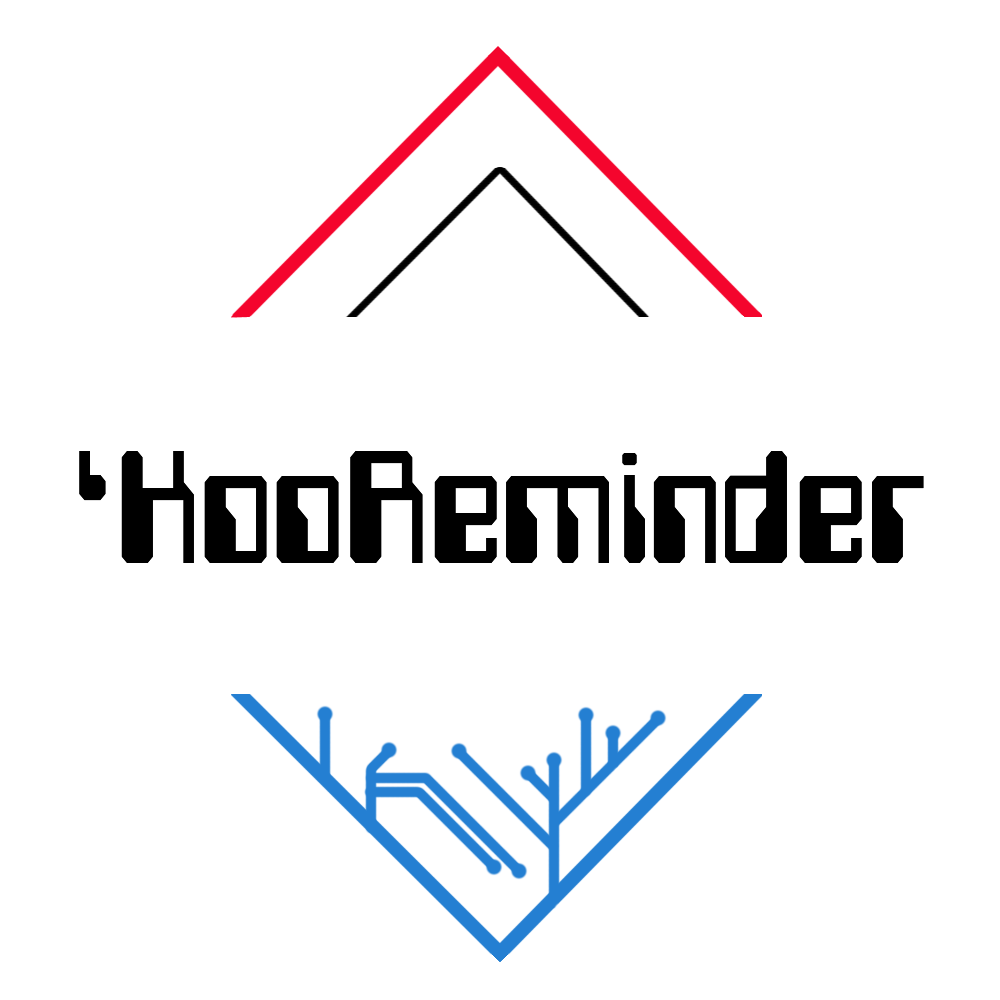
<style>
.page{position:relative;width:1000px;height:1000px;background:#ffffff}
.page>*{position:absolute;margin:0}
.t1{font:185px "Computerfont";color:#000000;scale:0.83 1}
</style>
<div class="page">
<p class="t1" style="left:79px;top:451px;width:845px;height:112px">‘KooReminder</p>
</div>
